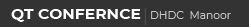
<style>
.page{position:relative;width:249px;height:27px;background:#333333}
.page>*{position:absolute;margin:0}
.t1{font:15.2px "Montserrat-Bold";color:#ffffff}
.t2{font:10.8px "Montserrat-Regular";color:#c7c5c5}
</style>
<div class="page">
<p class="t1" style="left:11px;top:9px;width:130px;height:13px">QT CONFERNCE</p>
<p class="t2" style="left:151px;top:11px;width:80px;height:8px">DHDC  Manoor</p>
</div>
